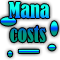
<style>
.page{position:relative;width:60px;height:60px}
.page>*{position:absolute;margin:0}
.t1{font:20px "BernardMT-Condensed"}
.t2{font:18px "BernardMT-Condensed"}
</style>
<div class="page">
<p class="t1" style="left:9px;top:2px;width:41px;height:41px"><span class="t2">  </span>Mana<br>  costs<br>      --</p>
</div>
